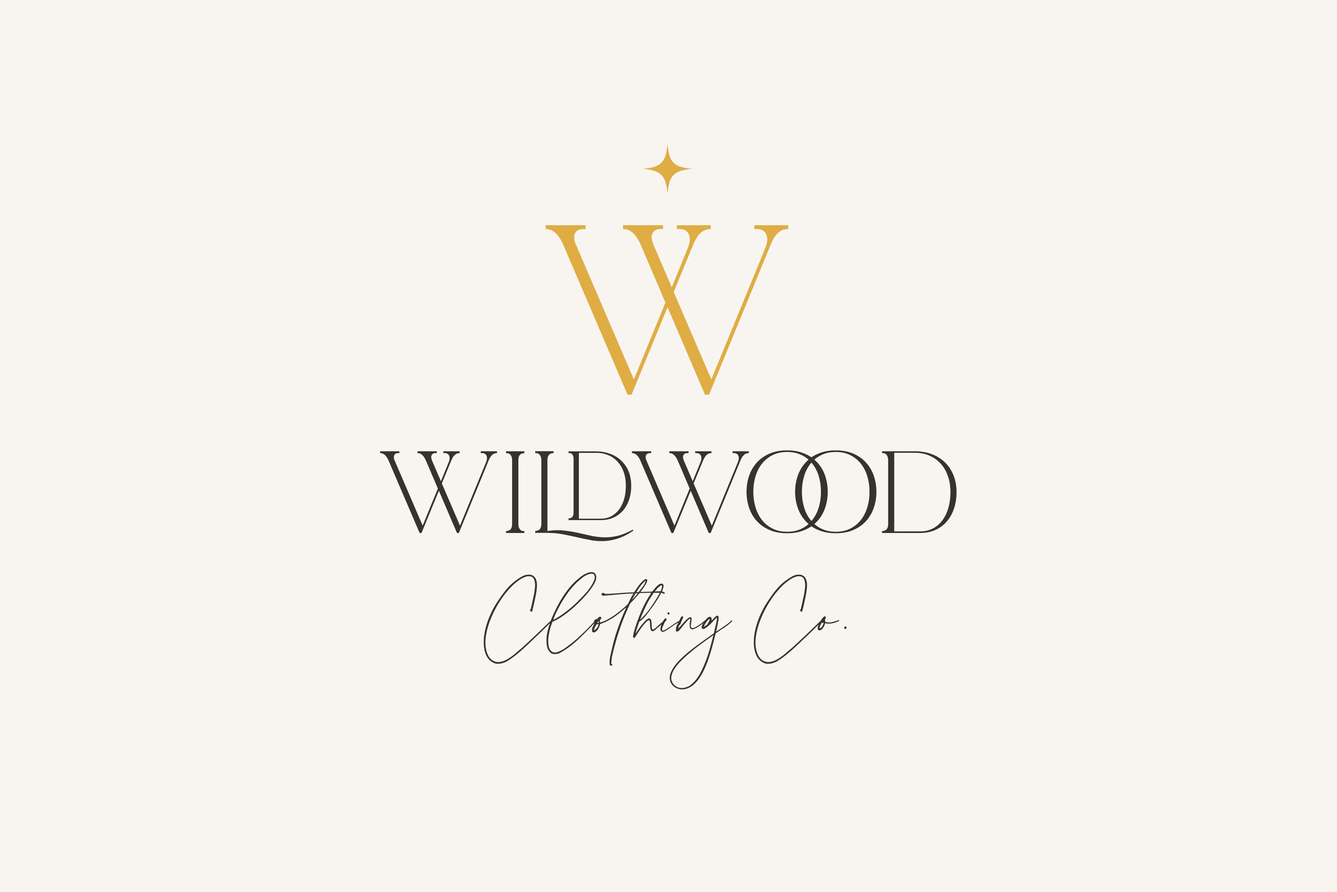
<style>
.page{position:relative;width:1337px;height:892px;background:#f8f5f0}
.page>*{position:absolute;margin:0}
.t1{font:125.4px "LaLuxesSerif";color:#dfad44}
.t2{font:211.9px "LaLuxesSerif";color:#dfad44}
.t3{font:102.3px "LaLuxesSerif";color:#35332d}
.t4{font:100.1px "LaLuxesScript";color:#35332d}
.t5{font:100.1px "LaLuxesScript";letter-spacing:-0.08em;color:#35332d}
</style>
<div class="page">
<p class="t1" style="left:643px;top:144px;width:50px;height:50px">*</p>
<p class="t2" style="left:546px;top:225px;width:243px;height:170px">w</p>
<p class="t3" style="left:380px;top:450px;width:577px;height:91px">wildwood</p>
<p class="t4" style="left:484px;top:572px;width:363px;height:117px">Clothin<span class="t5">g</span> Co.</p>
</div>
